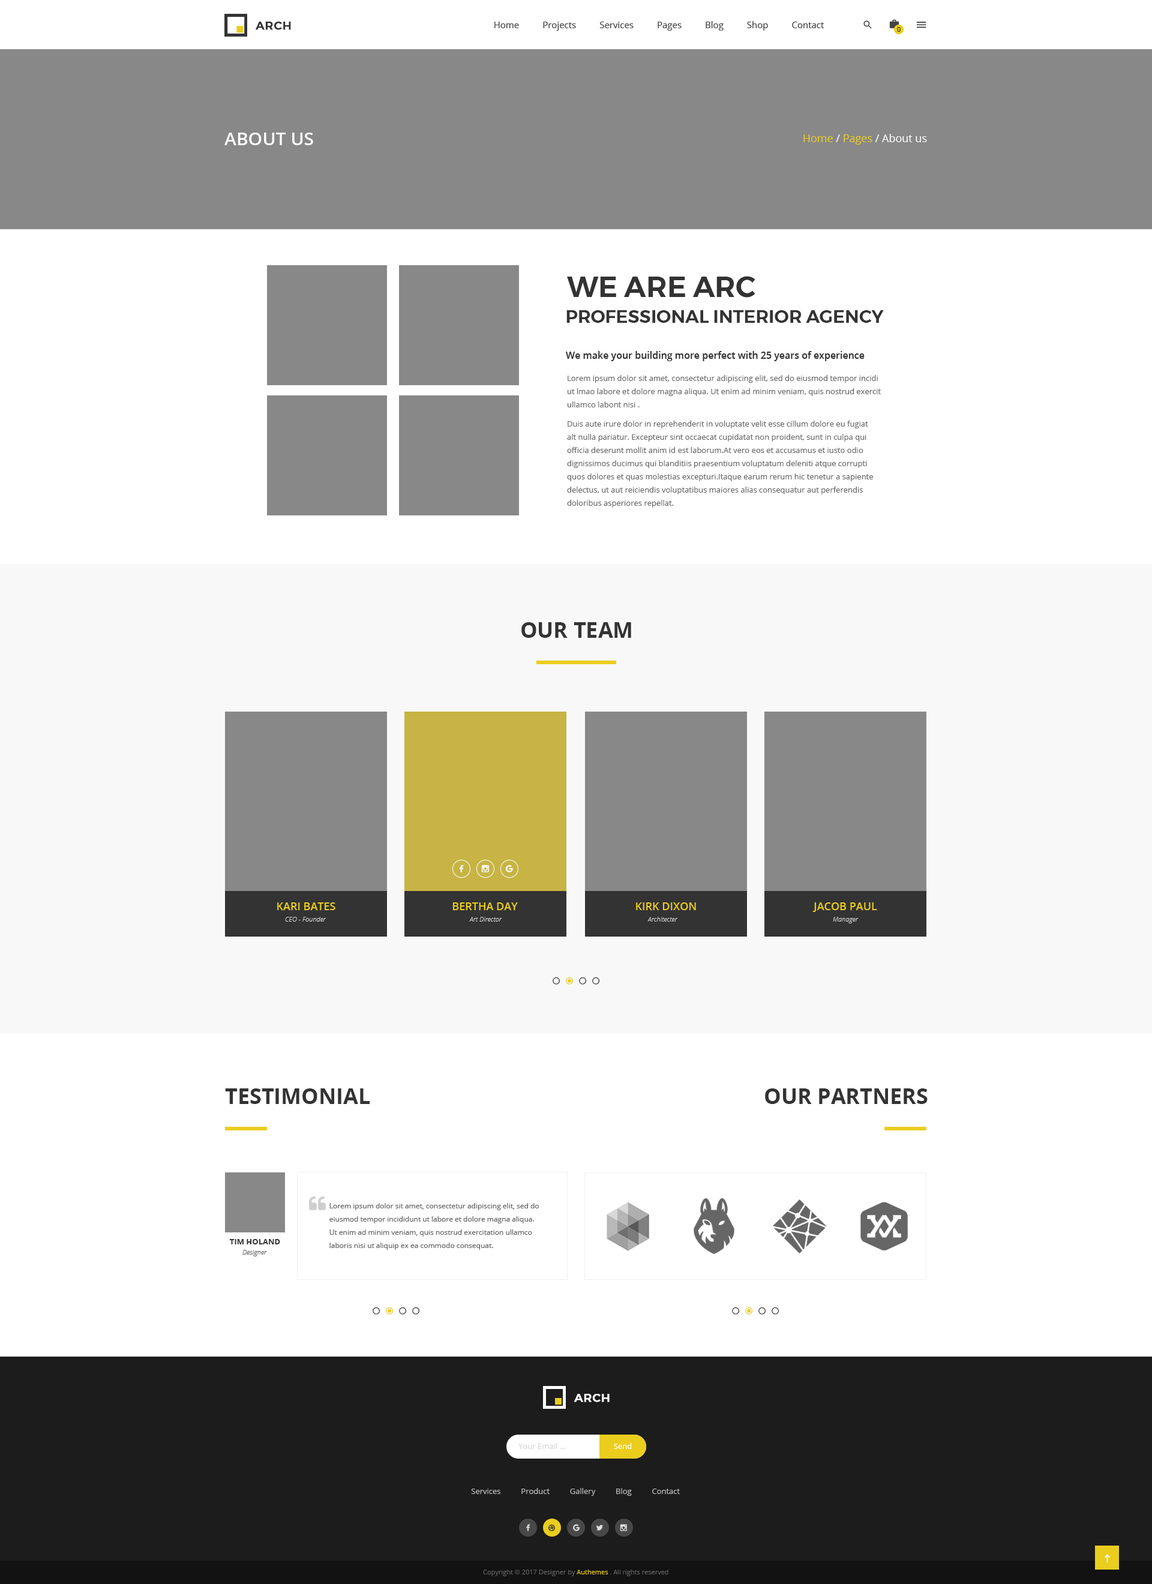
<style>
.page{position:relative;width:1152px;height:1584px;background:#ffffff}
.page>*{position:absolute;margin:0}
.t1{font:11.4px "Montserrat-Medium";letter-spacing:0.025em;color:#333333;text-transform:uppercase;font-weight:bold}
.t2{font:9px "OpenSans";color:#444444}
.t3{font:6.6px "OpenSans";color:#333333}
.t4{font:18px "OpenSans-Semibold";color:#ffffff;text-transform:uppercase}
.t5{font:10.8px "OpenSans-Regular";color:#ffffff}
.t6{font:10.8px "OpenSans-Regular";color:#ebcd1e}
.t7{font:28.8px "Montserrat-SemiBold";color:#333333;text-transform:uppercase}
.t8{font:18px "Montserrat-SemiBold";color:#333333;text-transform:uppercase}
.t9{font:9.6px "OpenSans-Semibold";color:#333333}
.t10{font:7.8px/13.2px "OpenSans-Regular";color:#666666}
.t11{font:21.6px "OpenSans-Bold";color:#333333;text-transform:uppercase}
.t12{font:10.8px "OpenSans-Semibold";color:#ebcd1e;text-transform:uppercase}
.t13{font:6.6px "OpenSansLight-Italic";color:#d5d5d5}
.t14{font:7.2px/13.2px "OpenSans";color:#666666}
.t15{font:7.8px "OpenSans-Bold";color:#333333;text-transform:uppercase}
.t16{font:6.6px "OpenSansLight-Italic";color:#666666}
.t17{font:11.4px "Montserrat-Medium";letter-spacing:0.025em;color:#ffffff;text-transform:uppercase;font-weight:bold}
.t18{font:7.8px "OpenSans";color:#d6d6d6}
.t19{font:7.8px "OpenSans";color:#ffffff}
.t20{font:7.8px "OpenSans";color:#c2c2c2}
.t21{font:6.6px "OpenSans";color:#626262}
.t22{font:6.6px "OpenSans";color:#ebcd1e}
</style>
<div class="page">
<p class="t1" style="left:256px;top:22px;width:35px;height:8px">arch</p>
<p class="t2" style="left:494px;top:21px;width:330px;height:10px">Home          Projects          Services          Pages          Blog          Shop          Contact</p>
<p class="t3" style="left:897px;top:27px;width:4px;height:5px">0</p>
<p class="t4" style="left:224px;top:133px;width:89px;height:12px">about us</p>
<p class="t5" style="left:803px;top:134px;width:124px;height:11px"><span class="t6">Home </span>/<span class="t6"> Pages </span>/ About us</p>
<p class="t7" style="left:567px;top:276px;width:188px;height:22px">we are arc</p>
<p class="t8" style="left:566px;top:310px;width:318px;height:13px">professional interior Agency</p>
<p class="t9" style="left:566px;top:351px;width:299px;height:10px">We make your building more perfect with 25 years of experience</p>
<p class="t10" style="left:567px;top:375px;width:314px;height:32px">Lorem ipsum dolor sit amet, consectetur adipiscing elit, sed do eiusmod tempor incidi ut lmao labore et dolore magna aliqua. Ut enim ad minim veniam, quis nostrud exercit ullamco labont nisi .</p>
<p class="t10" style="left:567px;top:421px;width:306px;height:87px">Duis aute irure dolor in reprehenderit in voluptate velit esse cillum dolore eu fugiat alt nulla pariatur. Excepteur sint occaecat cupidatat non proident, sunt in culpa qui officia deserunt mollit anim id est laborum.At vero eos et accusamus et iusto odio dignissimos ducimus qui blanditiis praesentium voluptatum deleniti atque corrupti quos dolores et quas molestias excepturi.Itaque earum rerum hic tenetur a sapiente delectus, ut aut reiciendis voluptatibus maiores alias consequatur aut perferendis doloribus asperiores repellat.</p>
<p class="t11" style="left:521px;top:622px;width:110px;height:16px">our team</p>
<p class="t12" style="left:277px;top:902px;width:58px;height:8px">Kari Bates</p>
<p class="t12" style="left:452px;top:902px;width:66px;height:8px">Bertha Day</p>
<p class="t12" style="left:636px;top:902px;width:60px;height:8px">Kirk Dixon</p>
<p class="t12" style="left:812px;top:902px;width:65px;height:10px">Jacob Paul</p>
<p class="t13" style="left:285px;top:917px;width:41px;height:5px">CEO - Founder</p>
<p class="t13" style="left:469px;top:917px;width:33px;height:5px">Art Director</p>
<p class="t13" style="left:647px;top:917px;width:31px;height:5px">Architecter</p>
<p class="t13" style="left:833px;top:917px;width:26px;height:6px">Manager</p>
<p class="t11" style="left:225px;top:1088px;width:145px;height:16px">testimonial</p>
<p class="t11" style="left:765px;top:1088px;width:163px;height:16px">our partners</p>
<p class="t14" style="left:329px;top:1203px;width:210px;height:47px">Lorem ipsum dolor sit amet, consectetur adipiscing elit, sed do eiusmod tempor incididunt ut labore et dolore magna aliqua. Ut enim ad minim veniam, quis nostrud exercitation ullamco laboris nisi ut aliquip ex ea commodo consequat.</p>
<p class="t15" style="left:229px;top:1239px;width:51px;height:5px">tim holand</p>
<p class="t16" style="left:242px;top:1250px;width:25px;height:6px">Designer</p>
<p class="t17" style="left:574px;top:1394px;width:36px;height:8px">arch</p>
<p class="t18" style="left:518px;top:1443px;width:48px;height:6px">Your Email ...</p>
<p class="t19" style="left:614px;top:1443px;width:18px;height:6px">Send</p>
<p class="t20" style="left:471px;top:1488px;width:209px;height:8px">Services          Product          Gallery          Blog          Contact</p>
<p class="t21" style="left:483px;top:1570px;width:185px;height:6px">Copyright © 2017 Designer by <span class="t22">Authemes </span>. All rights reserved</p>
</div>
